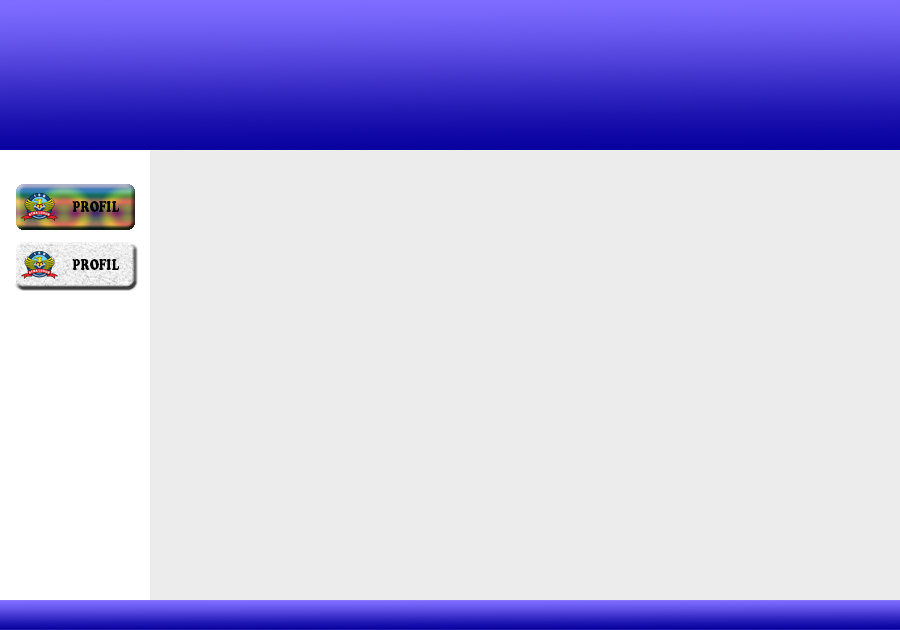
<style>
.page{position:relative;width:900px;height:630px;background:#ececec}
.page>*{position:absolute;margin:0}
.t1{font:15.5px "CooperBlackStd";color:#040404;scale:0.73 1}
</style>
<div class="page">
<p class="t1" style="left:72px;top:201px;width:47px;height:11px">PROFIL</p>
<p class="t1" style="left:72px;top:259px;width:47px;height:11px">PROFIL</p>
</div>
